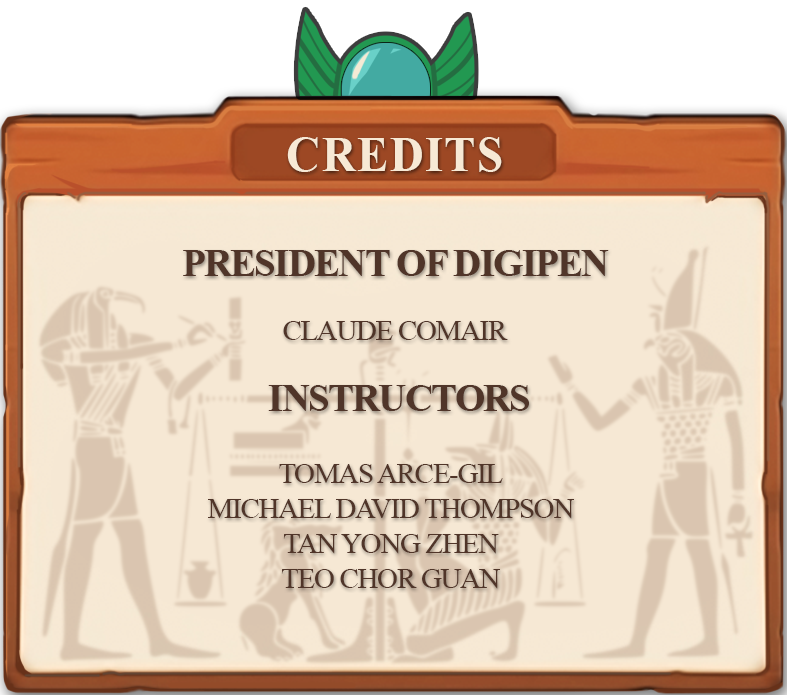
<style>
.page{position:relative;width:787px;height:695px;background:#f6e8d4}
.page>*{position:absolute;margin:0}
.t1{font:50px "TimesNewRomanPS-BoldMT";letter-spacing:0.02em;color:#f7e9d5;scale:0.95 1}
.t2{font:39.2px "TimesNewRomanPS-BoldMT";letter-spacing:-0.04em;color:#503529}
.t3{font:29.2px "TimesNewRomanPSMT";letter-spacing:-0.04em;color:#503529}
</style>
<div class="page">
<p class="t1" style="left:287px;top:137px;width:215px;height:35px">CREDITS</p>
<p class="t2" style="left:183px;top:250px;width:426px;height:26px">PRESIDENT OF DIGIPEN</p>
<p class="t3" style="left:283px;top:321px;width:225px;height:19px">CLAUDE COMAIR</p>
<p class="t2" style="left:268px;top:385px;width:261px;height:26px">INSTRUCTORS</p>
<p class="t3" style="left:208px;top:464px;width:366px;height:125px;text-align:center">TOMAS ARCE-GIL<br>MICHAEL DAVID THOMPSON<br>TAN YONG ZHEN<br>TEO CHOR GUAN</p>
</div>
